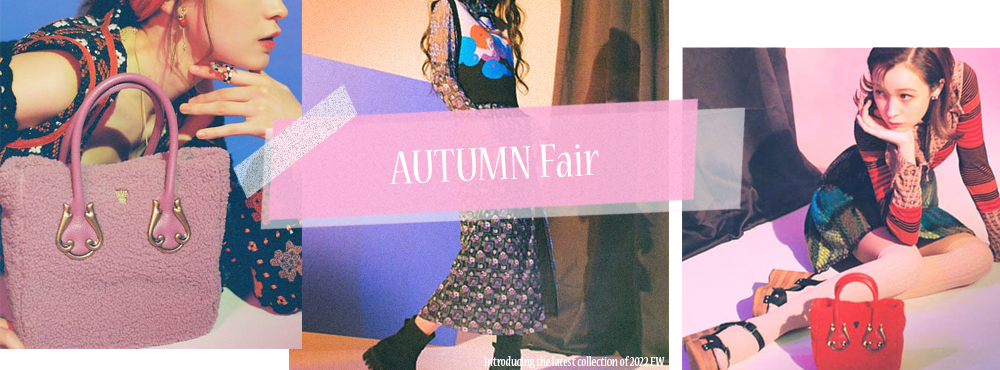
<style>
.page{position:relative;width:1000px;height:370px}
.page>*{position:absolute;margin:0}
.t1{font:52px "NuevaStd-Cond";color:#ffffff}
.t2{font:14px "NuevaStd-Cond";color:#ffffff}
</style>
<div class="page">
<p class="t1" style="left:390px;top:144px;width:209px;height:41px;rotate:-2deg">AUTUMN Fair</p>
<p class="t2" style="left:484px;top:356px;width:181px;height:12px">Introducing the latest collection of 2022 FW</p>
</div>
